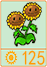
<style>
.page{position:relative;width:47px;height:67px;background:#ccead0}
.page>*{position:absolute;margin:0}
.t1{font:20.2px "SimHei";letter-spacing:-0.1em;color:#ff9c00;scale:0.84 1}
.t2{font:20.2px "SimHei";letter-spacing:0.025em;color:#ff9c00;scale:0.84 1}
.t3{font:20.2px "SimHei";letter-spacing:0.2em;color:#ff9c00;scale:0.84 1}
</style>
<div class="page">
<p class="t1" style="left:22px;top:50px;width:23px;height:15px">1<span class="t2">2</span><span class="t3">5</span></p>
</div>
